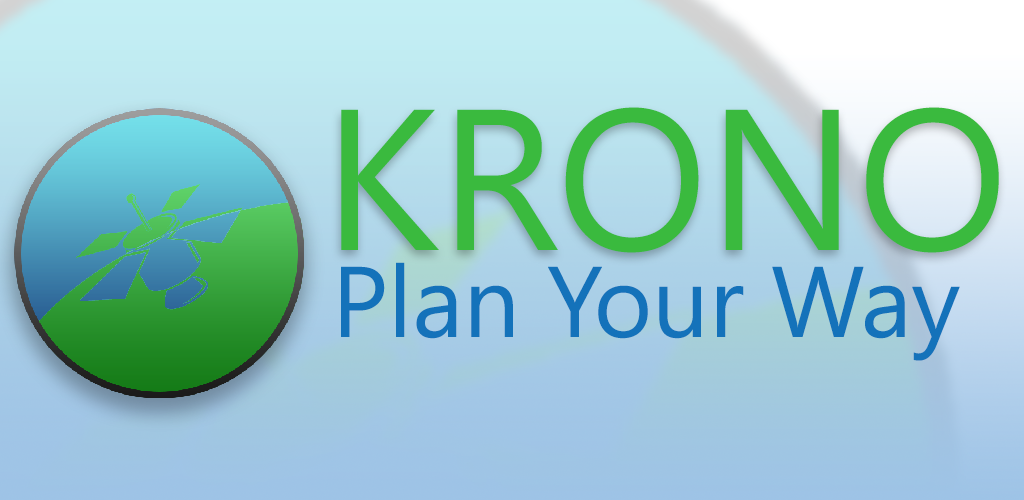
<style>
.page{position:relative;width:1024px;height:500px}
.page>*{position:absolute;margin:0}
.t1{font:200px "SegoeUI";color:#3aba3e}
.t2{font:99.9px "SegoeUI";color:#1472ba}
</style>
<div class="page">
<p class="t1" style="left:341px;top:107px;width:658px;height:146px">KRONO</p>
<p class="t2" style="left:341px;top:262px;width:619px;height:99px">Plan Your Way</p>
</div>
